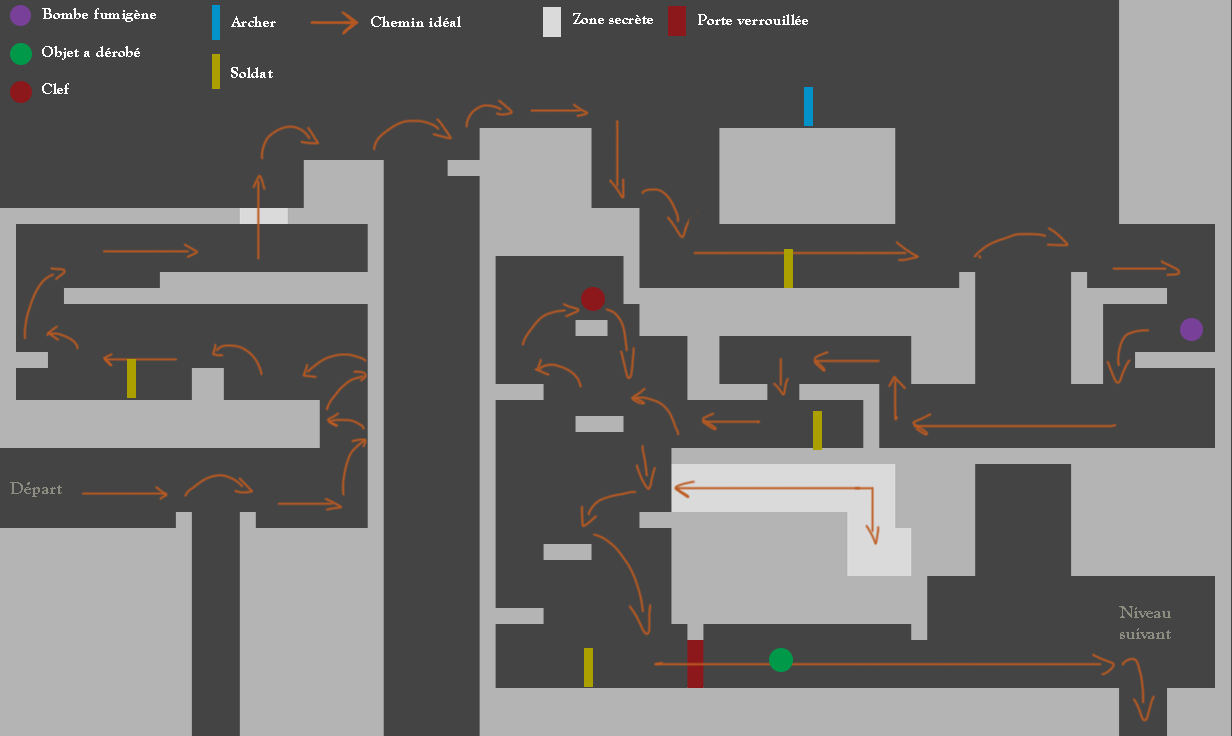
<style>
.page{position:relative;width:1232px;height:736px;background:#444444}
.page>*{position:absolute;margin:0}
.t1{font:16.2px "GoudyOldStyleT-Bold";color:#ffffff}
.t2{font:18px "GoudyOldStyleT-Bold";color:#8d8c80}
</style>
<div class="page">
<p class="t1" style="left:42px;top:8px;width:114px;height:14px">Bombe fumigène</p>
<p class="t1" style="left:231px;top:16px;width:45px;height:11px">Archer</p>
<p class="t1" style="left:371px;top:16px;width:90px;height:11px">Chemin idéal</p>
<p class="t1" style="left:573px;top:13px;width:80px;height:11px">Zone secrète</p>
<p class="t1" style="left:698px;top:14px;width:110px;height:11px">Porte verrouillée</p>
<p class="t1" style="left:42px;top:46px;width:98px;height:14px">Objet a dérobé</p>
<p class="t1" style="left:231px;top:67px;width:42px;height:11px">Soldat</p>
<p class="t1" style="left:42px;top:83px;width:27px;height:11px">Clef</p>
<p class="t2" style="left:10px;top:482px;width:52px;height:15px">Départ</p>
<p class="t2" style="left:1119px;top:606px;width:52px;height:33px;text-align:center">Niveau suivant</p>
</div>
